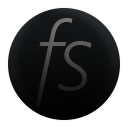
<style>
.page{position:relative;width:128px;height:128px;background:#ffffff}
.page>*{position:absolute;margin:0}
.t1{font:95.5px "SegoeUI-LightItalic";letter-spacing:-0.025em}
</style>
<div class="page">
<p class="t1" style="left:35px;top:18px;width:57px;height:88px">fs</p>
</div>
